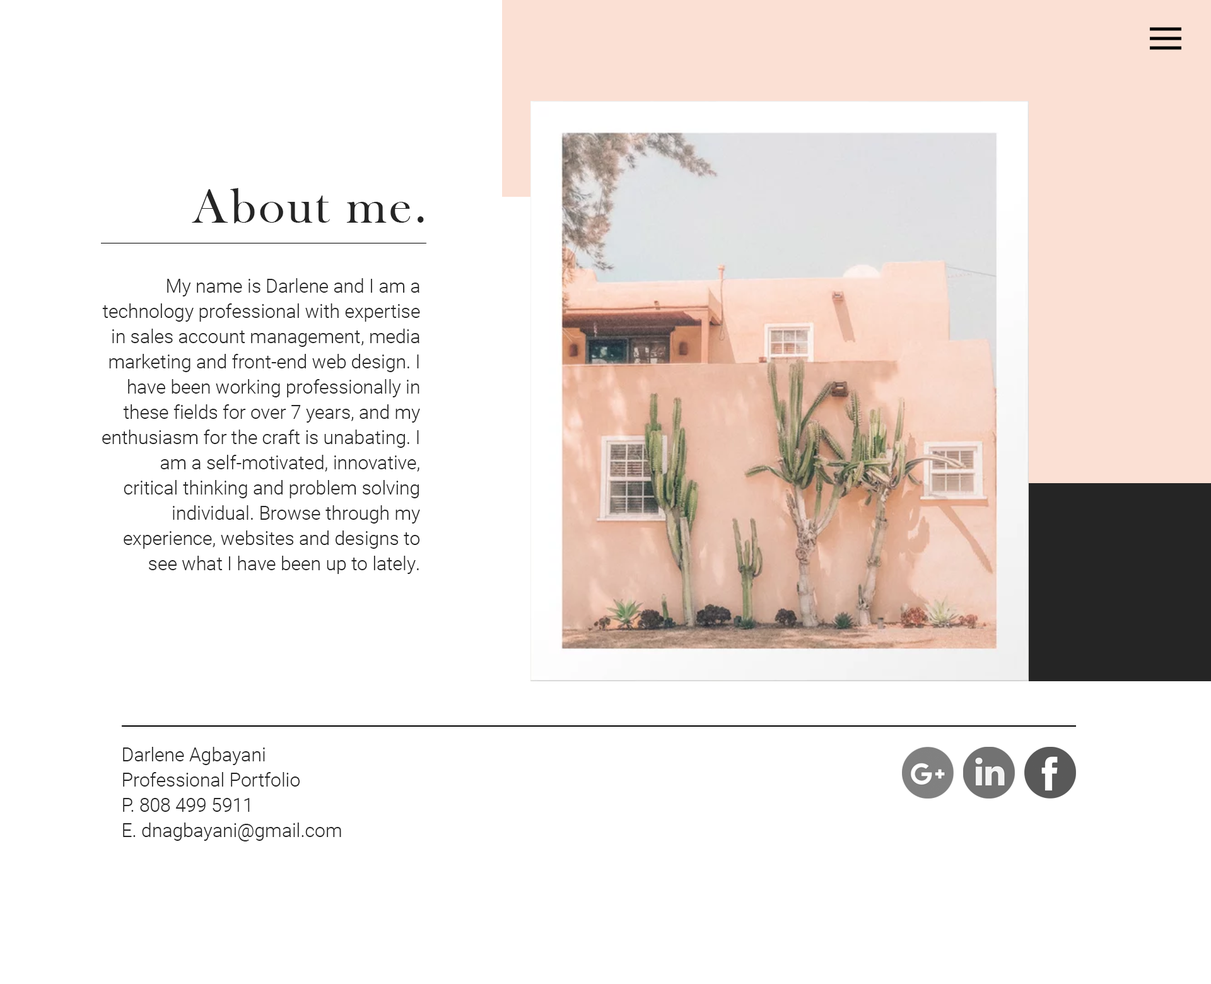
<style>
.page{position:relative;width:1211px;height:984px;background:#ffffff}
.page>*{position:absolute;margin:0}
.t1{font:50.5px "BaskOldFace";letter-spacing:0.05em;color:#252525}
.t2{font:18.9px/25.2px "Roboto-Light";color:#252525}
</style>
<div class="page">
<p class="t1" style="left:192px;top:188px;width:232px;height:35px">About me.</p>
<p class="t2" style="left:102px;top:278px;width:318px;height:296px;text-align:right">My name is Darlene and I am a technology professional with expertise in sales account management, media marketing and front-end web design. I have been working professionally in these fields for over 7 years, and my enthusiasm for the craft is unabating. I am a self-motivated, innovative, critical thinking and problem solving individual. Browse through my experience, websites and designs to see what I have been up to lately.</p>
<p class="t2" style="left:123px;top:747px;width:218px;height:95px">Darlene Agbayani<br>Professional Portfolio<br>P. 808 499 5911<br>E. dnagbayani@gmail.com</p>
</div>
